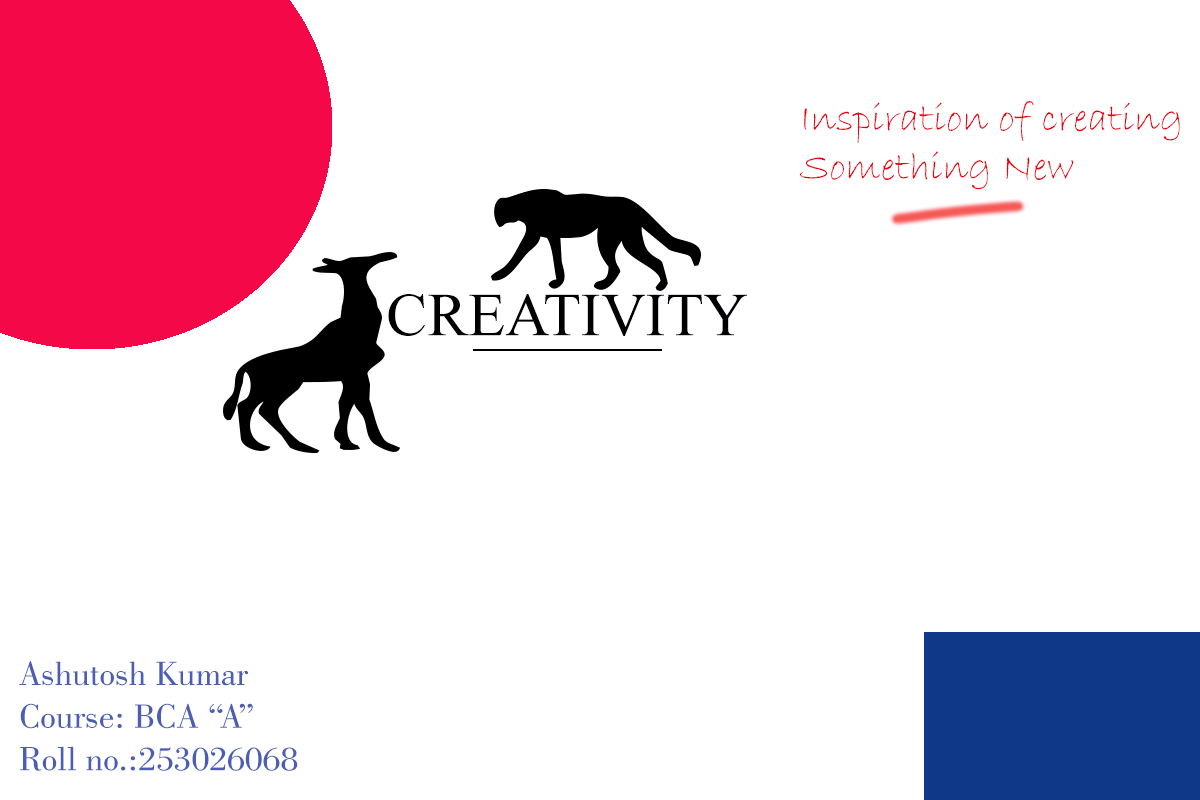
<style>
.page{position:relative;width:1200px;height:800px;background:#ffffff}
.page>*{position:absolute;margin:0}
.t1{font:40.6px "BradleyHandITC";color:#ec0011}
.t2{font:61px "TimesNewRomanPSMT";color:#040508}
.t3{font:35.6px "BodoniBT-Book";color:#5462af}
</style>
<div class="page">
<p class="t1" style="left:800px;top:101px;width:380px;height:89px">Inspiration of creating<br>Something New</p>
<p class="t2" style="left:388px;top:294px;width:359px;height:42px">CREATIVITY</p>
<p class="t3" style="left:19px;top:661px;width:279px;height:110px">Ashutosh Kumar<br>Course: BCA “A”<br>Roll no.:253026068</p>
</div>
